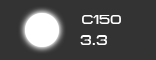
<style>
.page{position:relative;width:156px;height:60px;background:#333333}
.page>*{position:absolute;margin:0}
.t1{font:13px "MetroDF";color:#ffffff}
.t2{font:13.7px "MetroDF";color:#ffffff}
</style>
<div class="page">
<p class="t1" style="left:82px;top:15px;width:39px;height:9px">c150</p>
<p class="t2" style="left:80px;top:35px;width:27px;height:10px">3.3</p>
</div>
